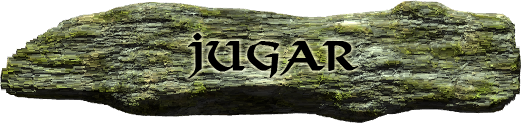
<style>
.page{position:relative;width:521px;height:123px;background:#ffffff}
.page>*{position:absolute;margin:0}
.t1{font:38px "Viking-Medium";color:#000000;font-weight:bold}
</style>
<div class="page">
<p class="t1" style="left:187px;top:33px;width:172px;height:46px">Jugar</p>
</div>
